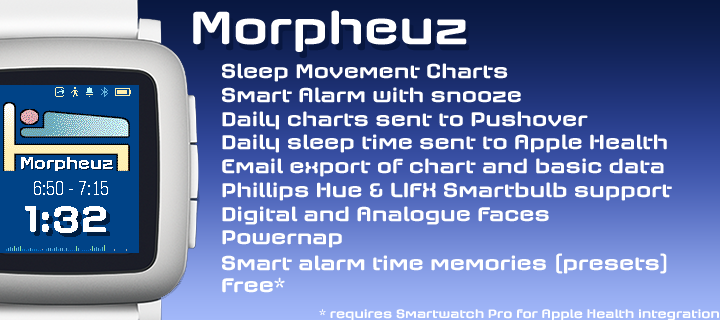
<style>
.page{position:relative;width:720px;height:320px}
.page>*{position:absolute;margin:0}
.t1{font:47.8px "AxaxaxRg-Bold";color:#ffffff}
.t2{font:20.8px "AxaxaxRg-Bold";color:#ffffff}
.t3{font:12.5px "AxaxaxRg-Bold";color:#ffffff}
</style>
<div class="page">
<p class="t1" style="left:193px;top:10px;width:274px;height:42px">Morpheuz</p>
<p class="t2" style="left:222px;top:63px;width:286px;height:19px">Sleep Movement Charts</p>
<p class="t2" style="left:222px;top:87px;width:299px;height:16px">Smart Alarm with snooze</p>
<p class="t2" style="left:222px;top:111px;width:366px;height:19px">Daily charts sent to Pushover</p>
<p class="t2" style="left:222px;top:134px;width:445px;height:19px">Daily sleep time sent to Apple Health</p>
<p class="t2" style="left:222px;top:158px;width:442px;height:19px">Email export of chart and basic data</p>
<p class="t2" style="left:222px;top:182px;width:450px;height:19px">Phillips Hue &amp; LIFX Smartbulb support</p>
<p class="t2" style="left:222px;top:206px;width:327px;height:19px">Digital and Analogue Faces</p>
<p class="t2" style="left:222px;top:230px;width:120px;height:18px">Powernap</p>
<p class="t2" style="left:222px;top:253px;width:445px;height:21px">Smart alarm time memories (presets)</p>
<p class="t2" style="left:222px;top:277px;width:63px;height:16px">Free*</p>
<p class="t3" style="left:319px;top:309px;width:400px;height:12px">* requires Smartwatch Pro for Apple Health integration</p>
</div>
